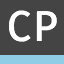
<style>
.page{position:relative;width:64px;height:64px;background:#444444}
.page>*{position:absolute;margin:0}
.t1{font:42.5px "FiraSans-Regular";letter-spacing:0.05em;color:#ffffff}
</style>
<div class="page">
<p class="t1" style="left:9px;top:10px;width:48px;height:32px">CP</p>
</div>
